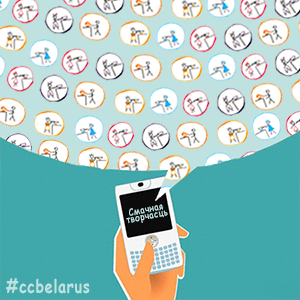
<style>
.page{position:relative;width:300px;height:300px;background:#40a8ab}
.page>*{position:absolute;margin:0}
.t1{font:10px/6.7px "ComicSansMS-Bold";letter-spacing:0.05em;color:#bfe1e0;scale:0.8 1}
.t2{font:18px "ComicSansMS-Bold";letter-spacing:0.05em;color:#bfe1e0;scale:0.8 1}
</style>
<div class="page">
<p class="t1" style="left:126px;top:204px;width:42px;height:20px;text-align:center;rotate:-11deg">Смачная<br>творчасць</p>
<p class="t2" style="left:6px;top:278px;width:84px;height:16px">#ccbelarus</p>
</div>
